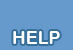
<style>
.page{position:relative;width:73px;height:50px;background:#6699cc}
.page>*{position:absolute;margin:0}
.t1{font:18px "ArialRoundedMTBold";color:#ffffff}
</style>
<div class="page">
<p class="t1" style="left:13px;top:31px;width:47px;height:13px">HELP</p>
</div>
